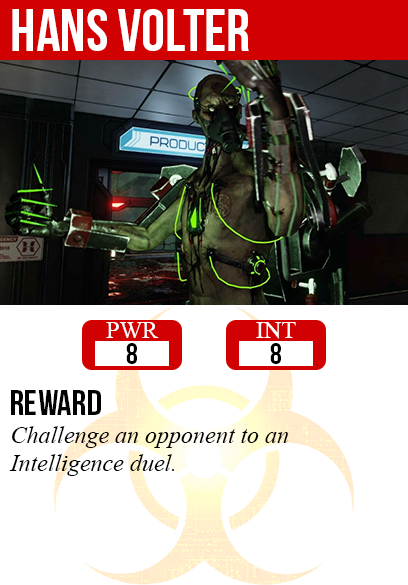
<style>
.page{position:relative;width:408px;height:585px;background:#ffffff}
.page>*{position:absolute;margin:0}
.t1{font:60px "BebasNeue";color:#ffffff}
.t2{font:24px "TimesNewRomanPSMT";color:#ffffff}
.t3{font:30px "BebasNeue";color:#000000}
.t4{font:36px "BebasNeue";color:#000000}
.t5{font:24px "TimesNewRomanPS-ItalicMT";color:#000000}
</style>
<div class="page">
<p class="t1" style="left:12px;top:9px;width:237px;height:42px">hans volter</p>
<p class="t2" style="left:106px;top:322px;width:53px;height:16px">PWR</p>
<p class="t2" style="left:256px;top:322px;width:40px;height:17px">INT</p>
<p class="t3" style="left:126px;top:343px;width:11px;height:21px">8</p>
<p class="t3" style="left:270px;top:343px;width:11px;height:21px">8</p>
<p class="t4" style="left:11px;top:390px;width:90px;height:25px">reward</p>
<p class="t5" style="left:9px;top:426px;width:279px;height:50px">Challenge an opponent to an<br>Intelligence duel.</p>
</div>
